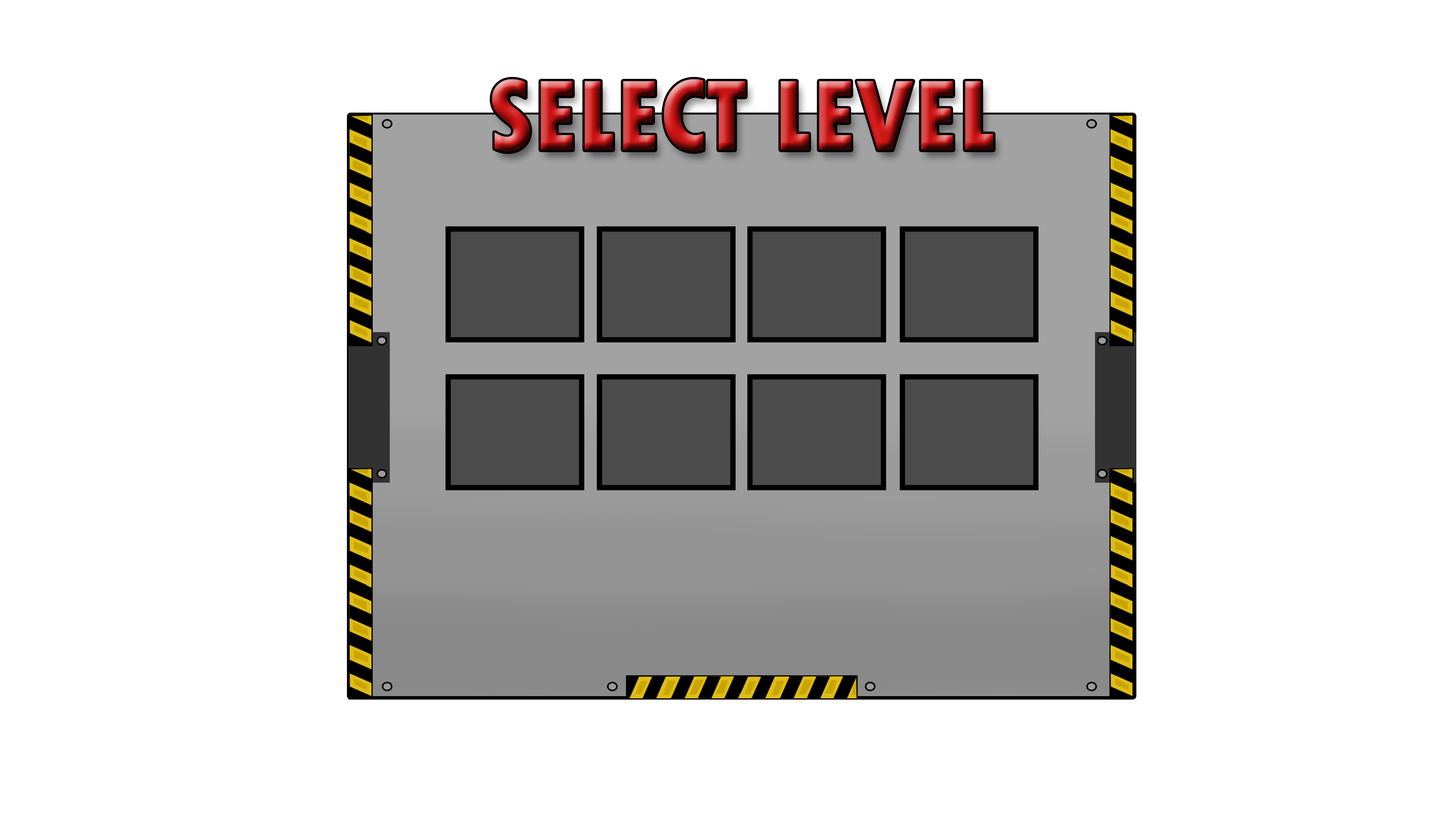
<style>
.page{position:relative;width:1456px;height:819px;background:#ffffff}
.page>*{position:absolute;margin:0}
.t1{font:105.3px "TwCenMT-CondensedExtraBold"}
</style>
<div class="page">
<p class="t1" style="left:492px;top:79px;width:501px;height:73px">SELECT LEVEL</p>
</div>
